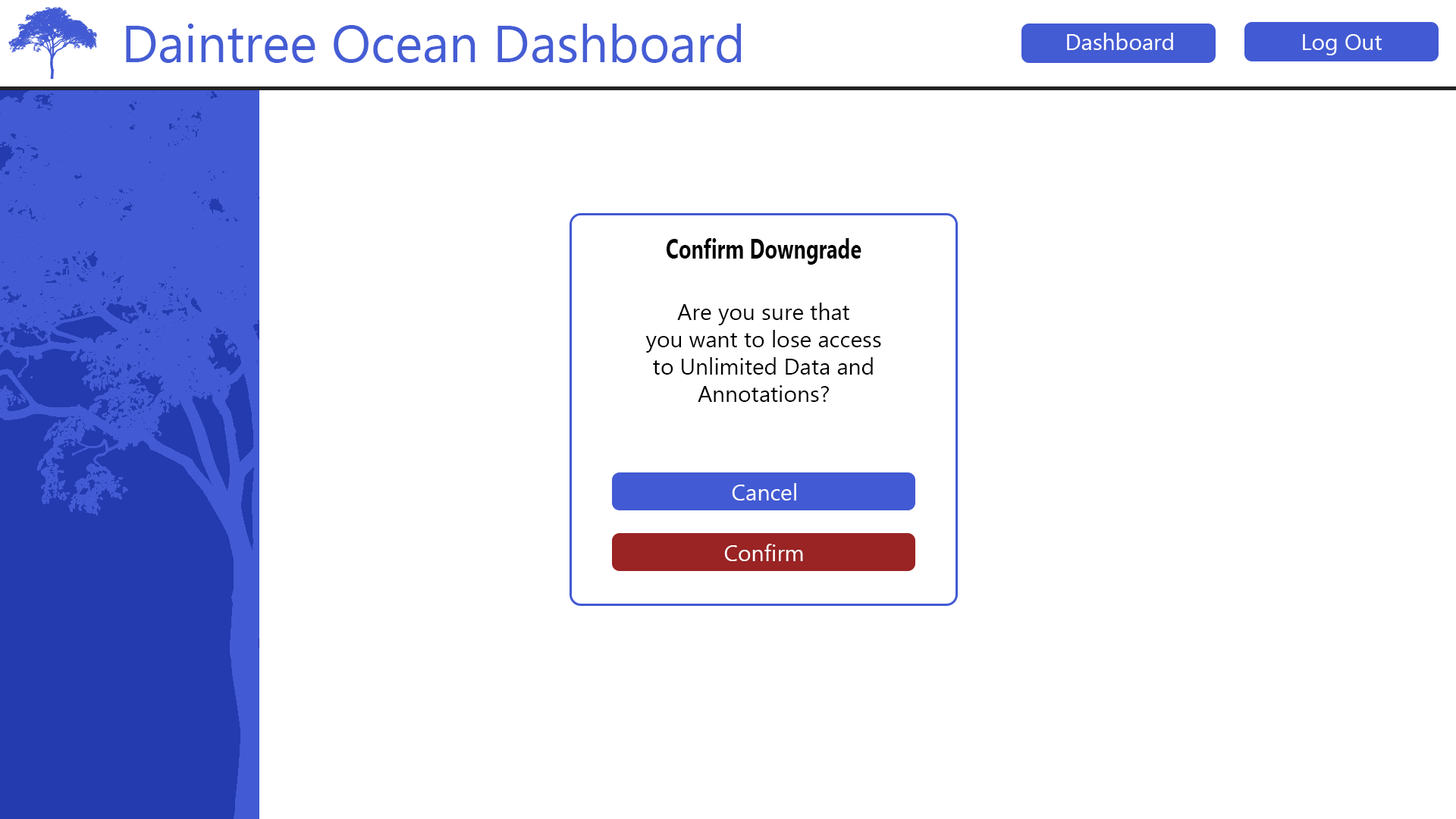
<style>
.page{position:relative;width:1456px;height:819px;background:#ffffff}
.page>*{position:absolute;margin:0}
.t1{font:52.3px "MyanmarText";color:#455dd4}
.t2{font:22.7px "MyanmarText";color:#ffffff}
.t3{font:27.3px "MyanmarText-Bold";color:#000000;scale:0.75 1}
.t4{font:22.7px "MyanmarText";color:#000000}
.t5{font:4.5px "MyanmarText";color:#656568}
</style>
<div class="page">
<p class="t1" style="left:126px;top:24px;width:615px;height:39px">Daintree Ocean Dashboard</p>
<p class="t2" style="left:1067px;top:33px;width:106px;height:17px">Dashboard</p>
<p class="t2" style="left:1303px;top:34px;width:79px;height:21px">Log Out</p>
<p class="t3" style="left:667px;top:238px;width:194px;height:27px">Confirm Downgrade</p>
<p class="t4" style="left:645px;top:303px;width:236px;height:99px;text-align:center"><span class="t5"><br></span>Are you sure that <br>you want to lose access <br>to Unlimited Data and <br>Annotations?<br><br><br>to Daintree</p>
<p class="t2" style="left:732px;top:483px;width:64px;height:17px">Cancel</p>
<p class="t2" style="left:724px;top:544px;width:79px;height:17px">Confirm</p>
</div>
